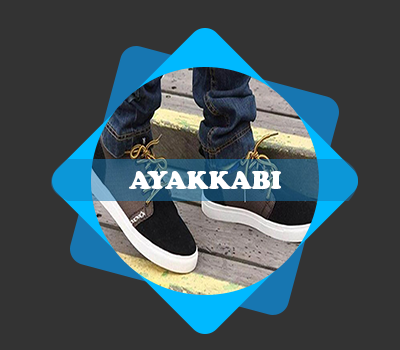
<style>
.page{position:relative;width:400px;height:350px;background:#333333}
.page>*{position:absolute;margin:0}
.t1{font:25px "CooperBlackStd";color:#ffffff}
</style>
<div class="page">
<p class="t1" style="left:129px;top:171px;width:152px;height:18px">AYAKKABI</p>
</div>
